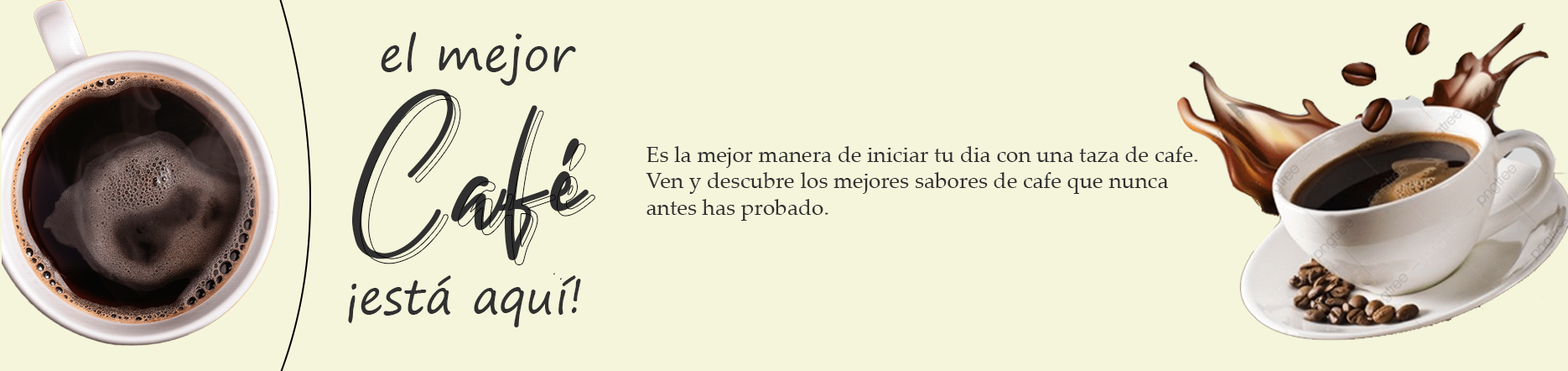
<style>
.page{position:relative;width:1568px;height:371px;background:#f5f5dc}
.page>*{position:absolute;margin:0}
.t1{font:46.9px "SegoePrint";color:#303030}
.t2{font:218.1px "CaliforniaStreet";color:#303030;font-weight:bold}
.t3{font:22px "PalatinoLinotype-Roman";color:#303030}
</style>
<div class="page">
<p class="t1" style="left:381px;top:32px;width:195px;height:54px">el mejor</p>
<p class="t2" style="left:351px;top:89px;width:238px;height:186px">Café</p>
<p class="t3" style="left:646px;top:146px;width:551px;height:75px">Es la mejor manera de iniciar tu dia con una taza de cafe.<br>Ven y descubre los mejores sabores de cafe que nunca<br>antes has probado.</p>
<p class="t1" style="left:348px;top:275px;width:233px;height:52px">¡está aquí!</p>
</div>
